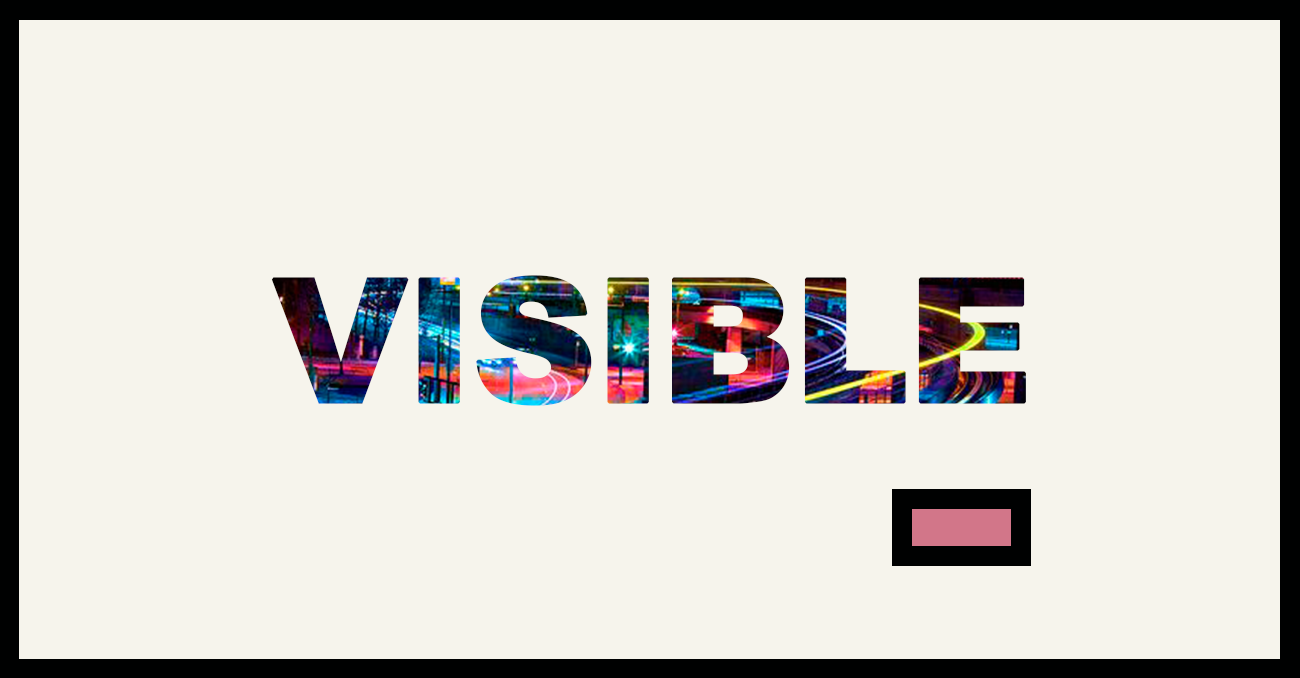
<style>
.page{position:relative;width:1300px;height:678px;background:#f6f4ec}
.page>*{position:absolute;margin:0}
.t1{font:172.4px "Arial-Black";letter-spacing:-0.034em;font-weight:bold}
</style>
<div class="page">
<p class="t1" style="left:271px;top:275px;width:755px;height:131px">VISIBLE</p>
</div>
